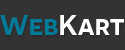
<style>
.page{position:relative;width:125px;height:50px;background:#333333}
.page>*{position:absolute;margin:0}
.t1{font:27.8px "Novecentosanswide-DemiBold";color:#ffffff}
.t2{font:27.8px "Novecentosanswide-DemiBold";color:#007a99}
</style>
<div class="page">
<p class="t1" style="left:0px;top:15px;width:124px;height:20px"><span class="t2">Web</span>Kart</p>
</div>
